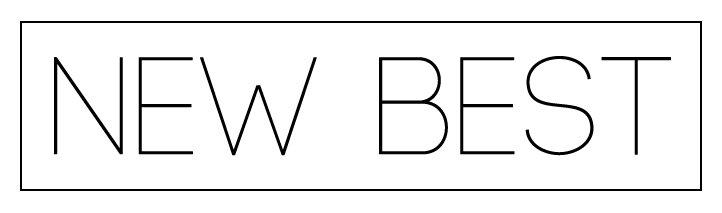
<style>
.page{position:relative;width:722px;height:213px;background:#ffffff}
.page>*{position:absolute;margin:0}
.t1{font:137.7px "Code-Light";color:#000000;font-weight:bold}
</style>
<div class="page">
<p class="t1" style="left:54px;top:56px;width:617px;height:100px">NEW BEST</p>
</div>
